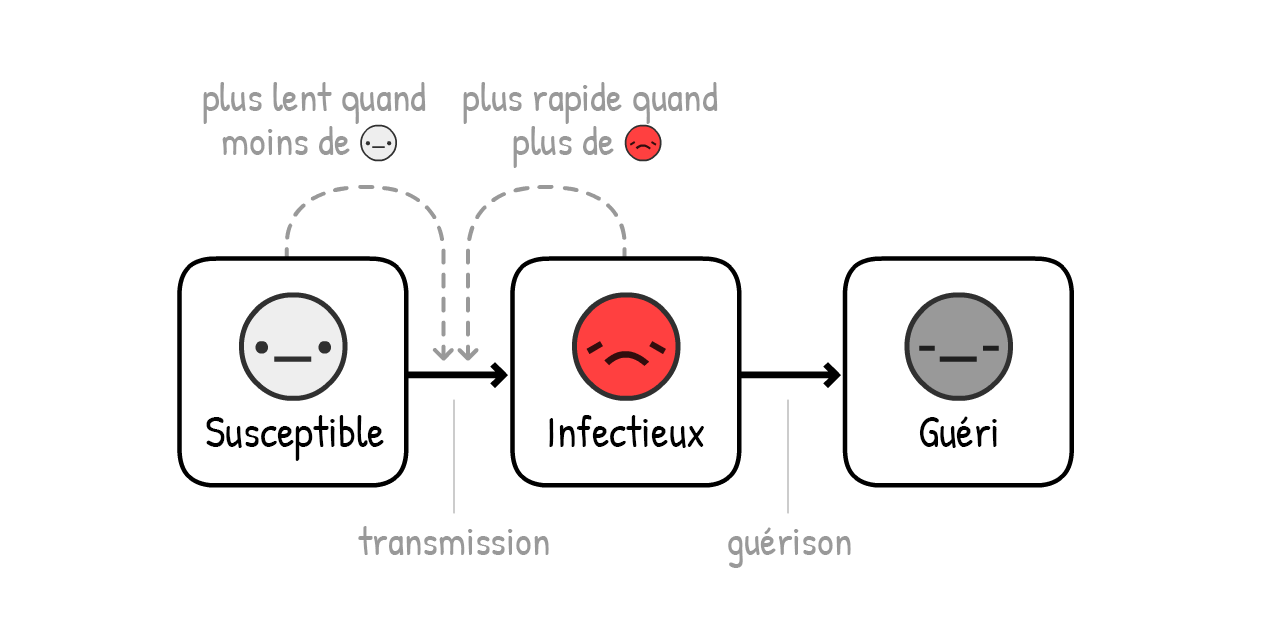
<style>
.page{position:relative;width:1280px;height:640px;background:#ffffff}
.page>*{position:absolute;margin:0}
.t1{font:70px "PatrickHand-Regular";color:#999999}
.t2{font:75px "PatrickHand-Regular";color:#000000}
</style>
<div class="page">
<p class="t1" style="left:203px;top:82px;width:223px;height:42px">plus lent quand</p>
<p class="t1" style="left:463px;top:82px;width:255px;height:42px">plus rapide quand</p>
<p class="t1" style="left:222px;top:126px;width:128px;height:29px">moins de</p>
<p class="t1" style="left:513px;top:126px;width:101px;height:42px">plus de</p>
<p class="t2" style="left:206px;top:415px;width:178px;height:46px">Susceptible</p>
<p class="t2" style="left:549px;top:415px;width:155px;height:33px">Infectieux</p>
<p class="t2" style="left:919px;top:416px;width:78px;height:32px">Guéri</p>
<p class="t1" style="left:358px;top:526px;width:191px;height:29px">transmission</p>
<p class="t1" style="left:728px;top:527px;width:123px;height:41px">guérison</p>
</div>
